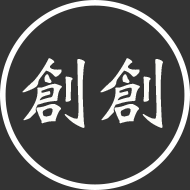
<style>
.page{position:relative;width:190px;height:190px;background:#333333}
.page>*{position:absolute;margin:0}
.t1{font:83.3px "Weibei-TC-Bold";color:#fcfcf8;scale:0.94 1}
</style>
<div class="page">
<p class="t1" style="left:22px;top:58px;width:141px;height:70px">創創</p>
</div>
